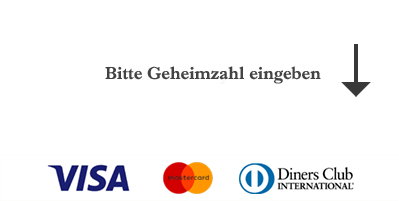
<style>
.page{position:relative;width:399px;height:201px;background:#ffffff}
.page>*{position:absolute;margin:0}
.t1{font:18px "URWImprintW01-Bold";color:#434343}
</style>
<div class="page">
<p class="t1" style="left:105px;top:66px;width:216px;height:18px">Bitte Geheimzahl eingeben</p>
</div>
